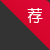
<style>
.page{position:relative;width:50px;height:50px;background:#333333}
.page>*{position:absolute;margin:0}
.t1{font:16px "YouYuan";letter-spacing:0.02em;color:#ffffff}
</style>
<div class="page">
<p class="t1" style="left:27px;top:8px;width:16px;height:15px">荐</p>
</div>
